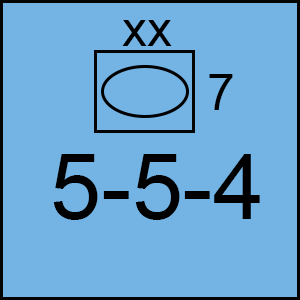
<style>
.page{position:relative;width:300px;height:300px;background:#74b4e4}
.page>*{position:absolute;margin:0}
.t1{font:50px "ArialMT";color:#000000}
.t2{font:91.7px "ArialMT";color:#000000}
</style>
<div class="page">
<p class="t1" style="left:122px;top:20px;width:50px;height:26px">xx</p>
<p class="t1" style="left:209px;top:74px;width:24px;height:36px">7</p>
<p class="t2" style="left:53px;top:154px;width:207px;height:66px">5-5-4</p>
</div>
